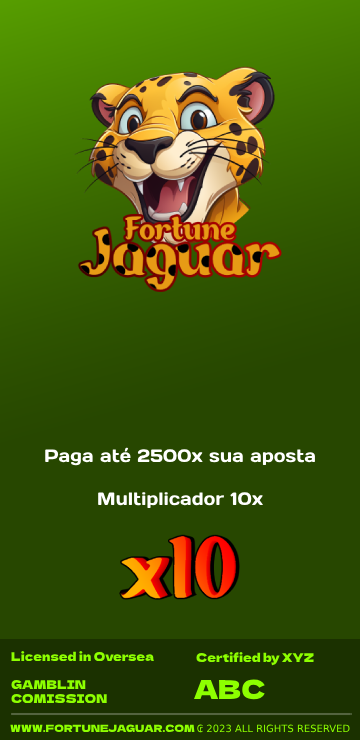
<style>
.page{position:relative;width:360px;height:740px;background:#274700}
.page>*{position:absolute;margin:0}
.t1{font:18px "DaysOne-Regular";color:#ffffff}
.t2{font:12px "DelaGothicOne-Regular";color:#8dff00}
.t3{font:26px "DelaGothicOne-Regular";color:#8dff00}
.t4{font:10px "DejaVuSans";color:#8dff00}
.t5{font:10px "DelaGothicOne-Regular";color:#8dff00}
</style>
<div class="page">
<p class="t1" style="left:45px;top:447px;width:270px;height:61px;text-align:center">Paga até 2500x sua aposta<br><br>Multiplicador 10x</p>
<p class="t2" style="left:11px;top:651px;width:143px;height:11px">Licensed in Oversea</p>
<p class="t2" style="left:196px;top:652px;width:118px;height:14px">Certified by XYZ</p>
<p class="t2" style="left:11px;top:680px;width:96px;height:24px">GAMBLIN<br>COMISSION</p>
<p class="t3" style="left:194px;top:679px;width:71px;height:21px">ABC</p>
<p class="t4" style="left:10px;top:724px;width:340px;height:9px"><span class="t5">WWW.FORTUNEJAGUAR.COM </span>₢ 2023 ALL RIGHTS RESERVED</p>
</div>
